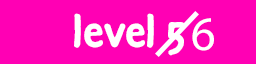
<style>
.page{position:relative;width:256px;height:64px;background:#ff00b4}
.page>*{position:absolute;margin:0}
.t1{font:48px "DuperPro-Bold";color:#ffffff}
.t2{font:48px "MyriadPro-Regular";color:#ffffff}
</style>
<div class="page">
<p class="t1" style="left:74px;top:13px;width:111px;height:43px">level 5</p>
<p class="t2" style="left:192px;top:18px;width:22px;height:33px">6</p>
</div>
